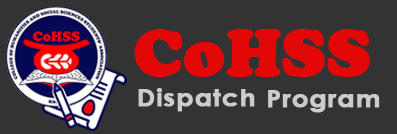
<style>
.page{position:relative;width:397px;height:134px;background:#333333}
.page>*{position:absolute;margin:0}
.t1{font:67px "CooperBlack";color:#e30808;font-weight:bold}
.t2{font:24.4px "CenturyGothic-Bold";letter-spacing:0.02em;color:#cccccc;font-weight:bold;scale:1.06 1}
</style>
<div class="page">
<p class="t1" style="left:134px;top:29px;width:236px;height:48px">CoHSS</p>
<p class="t2" style="left:138px;top:88px;width:117px;height:24px">Dispatch</p>
<p class="t2" style="left:268px;top:90px;width:112px;height:23px">Program</p>
</div>
